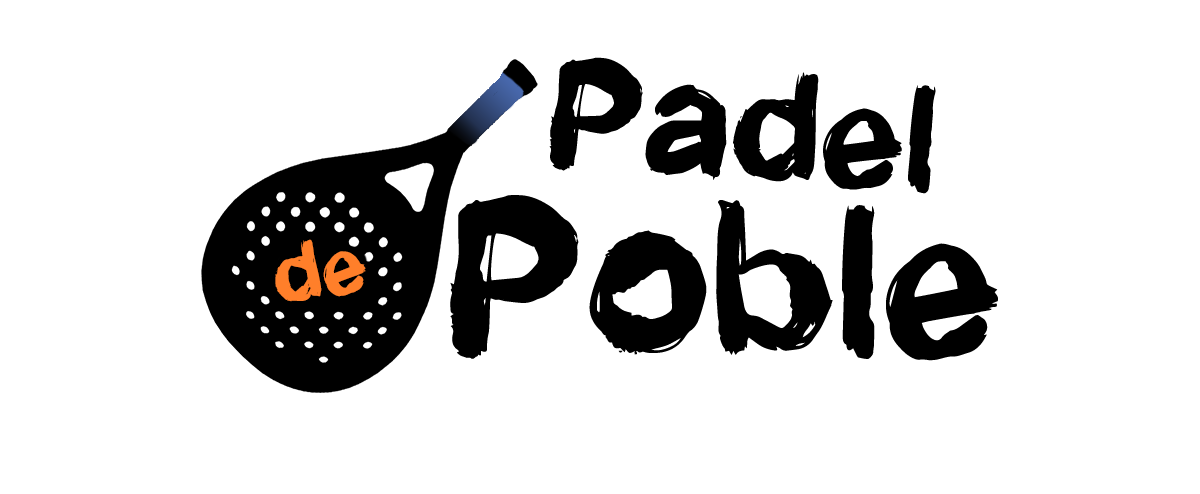
<style>
.page{position:relative;width:1200px;height:494px;background:#ffffff}
.page>*{position:absolute;margin:0}
.t1{font:133px "NewroticRegular";color:#000000}
.t2{font:190px "NewroticRegular";color:#000000}
.t3{font:72px "NewroticRegular";color:#ff7f2a}
</style>
<div class="page">
<p class="t1" style="left:549px;top:57px;width:387px;height:137px;rotate:4deg">Padel</p>
<p class="t2" style="left:450px;top:195px;width:548px;height:166px">Poble</p>
<p class="t3" style="left:275px;top:239px;width:91px;height:63px;rotate:-10deg">de</p>
</div>
